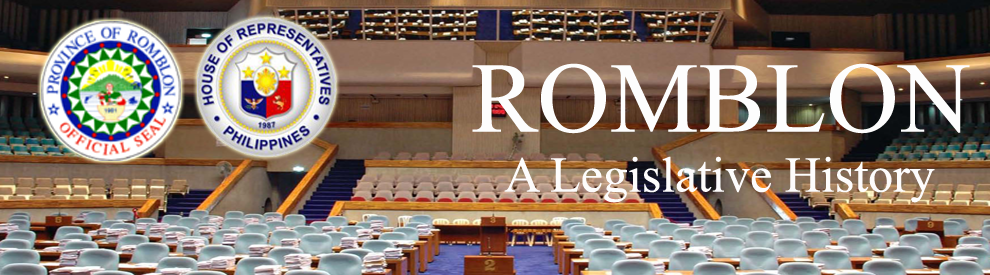
<style>
.page{position:relative;width:990px;height:275px}
.page>*{position:absolute;margin:0}
.t1{font:50px "TimesNewRomanPSMT";color:#fdfcfc}
.t2{font:100px "TimesNewRomanPSMT";color:#fdfdfd}
</style>
<div class="page">
<p class="t1" style="left:472px;top:63px;width:498px;height:140px;text-align:center"><span class="t2">ROMBLON<br></span>A Legislative History</p>
</div>
